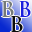
<style>
.page{position:relative;width:32px;height:32px}
.page>*{position:absolute;margin:0}
.t1{font:20.8px "TrajanPro-Bold";color:#747a79}
.t2{font:20.8px "TrajanPro-Bold";color:#1a1fdd}
.t3{font:20.8px "TrajanPro-Bold";color:#0a0b0b}
</style>
<div class="page">
<p class="t1" style="left:1px;top:1px;width:13px;height:16px">B</p>
<p class="t2" style="left:19px;top:1px;width:12px;height:16px">B</p>
<p class="t3" style="left:10px;top:16px;width:13px;height:16px">B</p>
</div>
